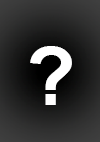
<style>
.page{position:relative;width:100px;height:142px}
.page>*{position:absolute;margin:0}
.t1{font:80.7px "Arial-BoldMT";color:#ffffff}
</style>
<div class="page">
<p class="t1" style="left:30px;top:46px;width:42px;height:59px">?</p>
</div>
